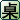
<style>
.page{position:relative;width:20px;height:20px}
.page>*{position:absolute;margin:0}
.t1{font:18px "SimHei";color:#000000}
</style>
<div class="page">
<p class="t1" style="left:2px;top:2px;width:17px;height:17px">桌</p>
</div>
